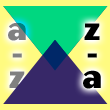
<style>
.page{position:relative;width:110px;height:110px;background:#372868}
.page>*{position:absolute;margin:0}
.t1{font:30px/24px "Cosmos-ExtraBold";color:#808080}
.t2{font:30px/24px "Cosmos-ExtraBold";color:#000000}
</style>
<div class="page">
<p class="t1" style="left:8px;top:22px;width:18px;height:66px;text-align:center">a<br>-<br>z</p>
<p class="t2" style="left:83px;top:23px;width:18px;height:66px;text-align:center">z<br>-<br>a</p>
</div>
